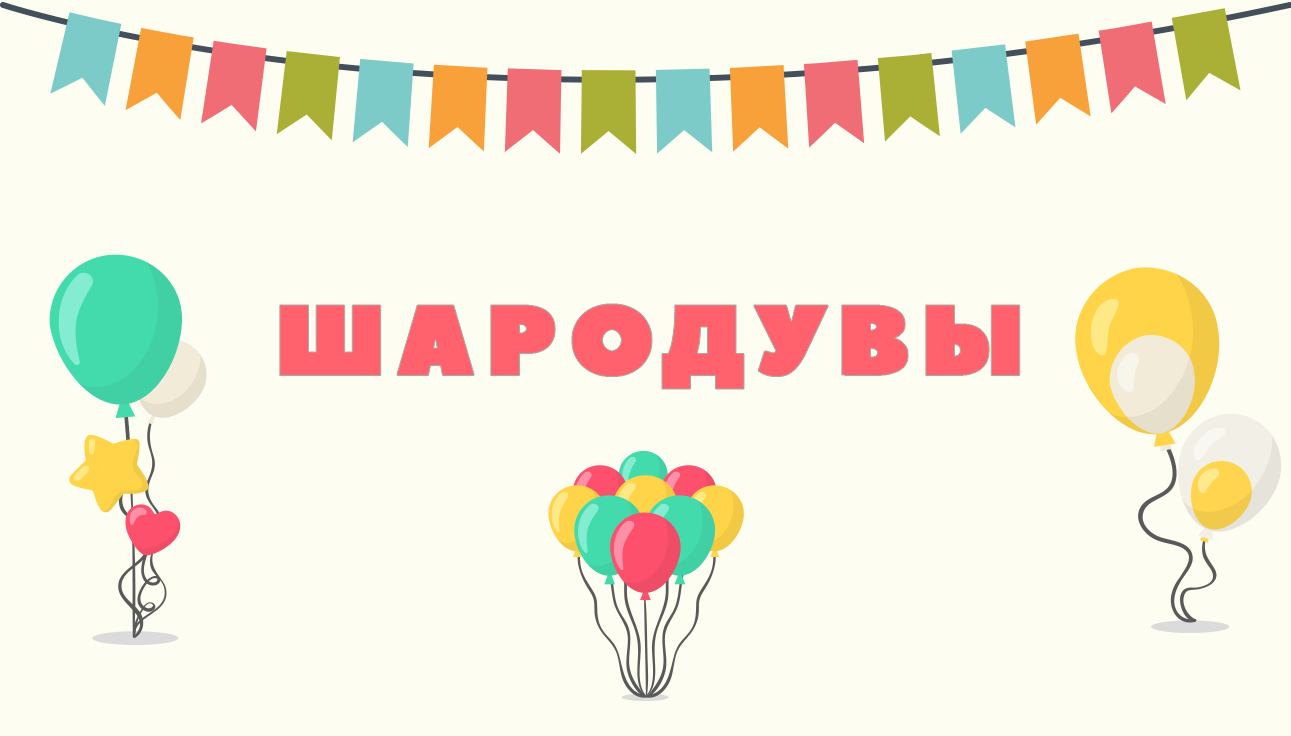
<style>
.page{position:relative;width:1291px;height:736px;background:#fdfdf2}
.page>*{position:absolute;margin:0}
.t1{font:99px "PeaceSans";letter-spacing:0.1em;color:#ff626d;font-weight:bold}
</style>
<div class="page">
<p class="t1" style="left:279px;top:304px;width:741px;height:85px">ШАРОДУВЫ</p>
</div>
